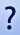
<style>
.page{position:relative;width:20px;height:35px}
.page>*{position:absolute;margin:0}
.t1{font:33px "MyriadPro-Regular";color:#00164a}
</style>
<div class="page">
<p class="t1" style="left:5px;top:6px;width:11px;height:24px">?</p>
</div>
